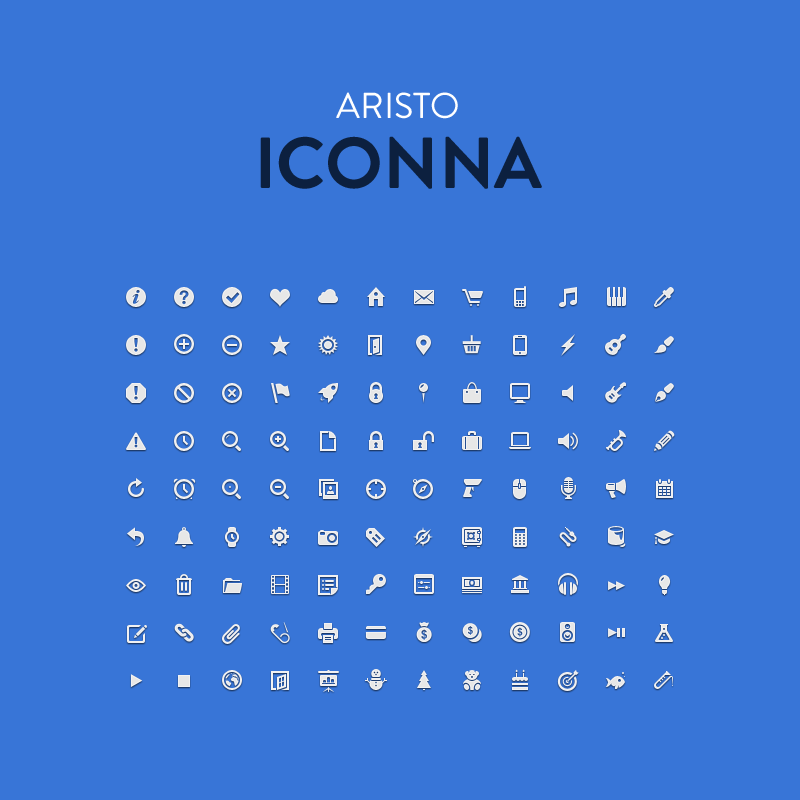
<style>
.page{position:relative;width:800px;height:800px;background:#3875d7}
.page>*{position:absolute;margin:0}
.t1{font:36px/70px "BrandonGrotesque-Regular";color:#ffffff;text-transform:uppercase}
.t2{font:72px/70px "BrandonGrotesque-Bold";color:#0c203f;text-transform:uppercase}
</style>
<div class="page">
<p class="t1" style="left:260px;top:92px;width:282px;height:97px;text-align:center">Aristo<br><span class="t2">Iconna</span></p>
</div>
